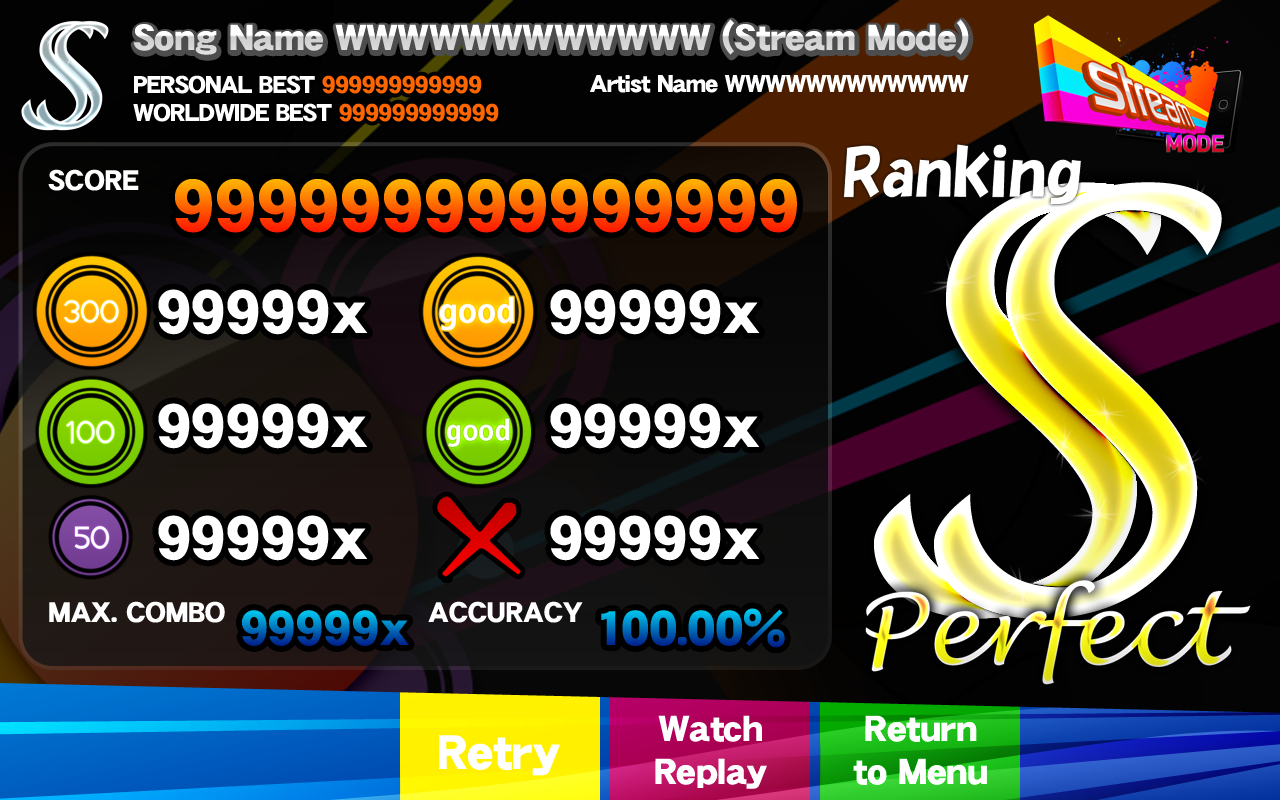
<style>
.page{position:relative;width:1280px;height:800px}
.page>*{position:absolute;margin:0}
.t1{font:36px "DFGothic-EB-WING-RKSJ-H"}
.t2{font:24px "DFGothic-EB-WING-RKSJ-H";letter-spacing:-0.025em;color:#ffffff}
.t3{font:24px "DFGothic-EB-WING-RKSJ-H";letter-spacing:-0.025em;color:#ff6600}
.t4{font:28px "DFGothic-EB-WING-RKSJ-H";color:#ffffff}
.t5{font:72px "DFGothic-EB-WING-RKSJ-H"}
.t6{font:60px "DFGothic-EB-WING-RKSJ-H";color:#ffffff}
.t7{font:48px "DFGothic-EB-WING-RKSJ-H"}
.t8{font:36px "DFGothic-EB-WING-RKSJ-H";color:#ffffff}
.t9{font:48px "DFGothic-EB-WING-RKSJ-H";color:#ffffff}
</style>
<div class="page">
<p class="t1" style="left:133px;top:19px;width:836px;height:36px">Song Name WWWWWWWWWWWW (Stream Mode)</p>
<p class="t1" style="left:133px;top:19px;width:836px;height:36px">Song Name WWWWWWWWWWWW (Stream Mode)</p>
<p class="t2" style="left:134px;top:75px;width:348px;height:19px">PERSONAL BEST <span class="t3">999999999999</span></p>
<p class="t2" style="left:590px;top:75px;width:379px;height:18px">Artist Name WWWWWWWWWWWW</p>
<p class="t2" style="left:133px;top:103px;width:366px;height:19px">WORLDWIDE BEST <span class="t3">999999999999</span></p>
<p class="t4" style="left:48px;top:169px;width:91px;height:22px">SCORE</p>
<p class="t5" style="left:175px;top:179px;width:622px;height:54px">999999999999999</p>
<p class="t6" style="left:158px;top:289px;width:210px;height:46px">99999x</p>
<p class="t6" style="left:550px;top:289px;width:210px;height:46px">99999x</p>
<p class="t6" style="left:158px;top:403px;width:210px;height:46px">99999x</p>
<p class="t6" style="left:550px;top:403px;width:210px;height:46px">99999x</p>
<p class="t6" style="left:158px;top:515px;width:210px;height:46px">99999x</p>
<p class="t6" style="left:550px;top:515px;width:210px;height:46px">99999x</p>
<p class="t4" style="left:49px;top:601px;width:176px;height:22px">MAX. COMBO</p>
<p class="t4" style="left:428px;top:601px;width:155px;height:22px">ACCURACY</p>
<p class="t7" style="left:242px;top:610px;width:167px;height:36px">99999x</p>
<p class="t7" style="left:601px;top:608px;width:184px;height:40px">100.00%</p>
<p class="t8" style="left:655px;top:715px;width:112px;height:74px;text-align:center">Watch<br>Replay</p>
<p class="t8" style="left:853px;top:715px;width:134px;height:70px;text-align:center">Return<br>to Menu</p>
<p class="t9" style="left:439px;top:735px;width:121px;height:41px">Retry</p>
</div>
